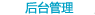
<style>
.page{position:relative;width:95px;height:15px;background:#ffffff}
.page>*{position:absolute;margin:0}
.t1{font:12px "MicrosoftYaHei";color:#00a0c5}
</style>
<div class="page">
<p class="t1" style="left:25px;top:1px;width:49px;height:13px">后台管理</p>
</div>
